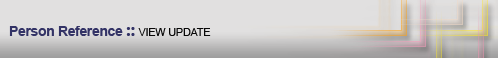
<style>
.page{position:relative;width:498px;height:58px;background:#e1e0e0}
.page>*{position:absolute;margin:0}
.t1{font:14px "Arial-BoldMT";letter-spacing:-0.025em;color:#333366}
.t2{font:18px "SegoeUI-Bold";letter-spacing:-0.025em;color:#333366}
.t3{font:11px "ArialMT";letter-spacing:-0.025em;color:#070707}
</style>
<div class="page">
<p class="t1" style="left:9px;top:26px;width:202px;height:10px">Person Reference <span class="t2">:: </span><span class="t3">VIEW UPDATE</span></p>
</div>
